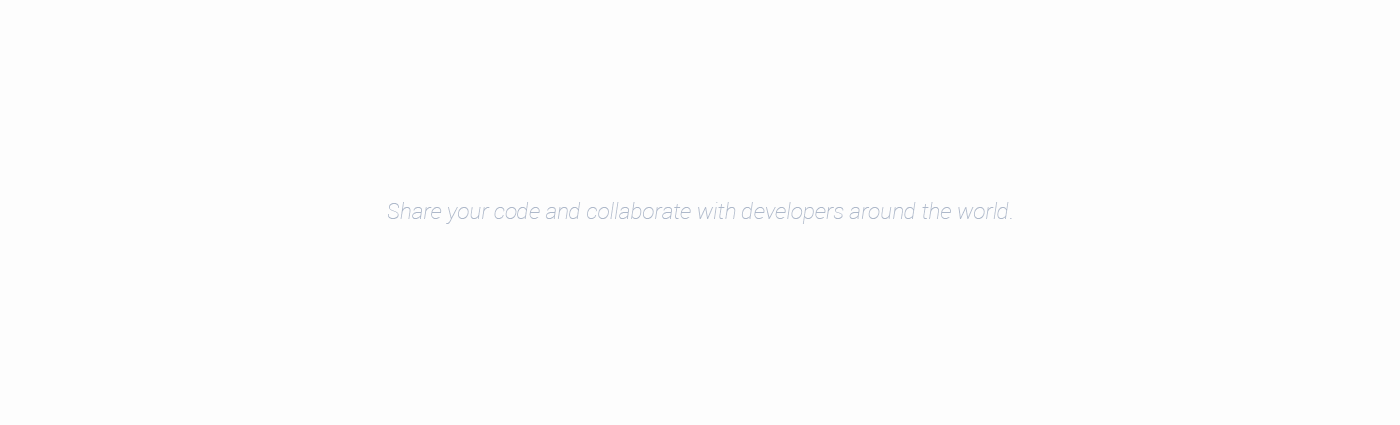
<style>
.page{position:relative;width:1400px;height:425px;background:#fdfdfd}
.page>*{position:absolute;margin:0}
.t1{font:22px "Roboto-ThinItalic";color:#adb8ca}
</style>
<div class="page">
<p class="t1" style="left:388px;top:202px;width:624px;height:22px">Share your code and collaborate with developers around the world.</p>
</div>
